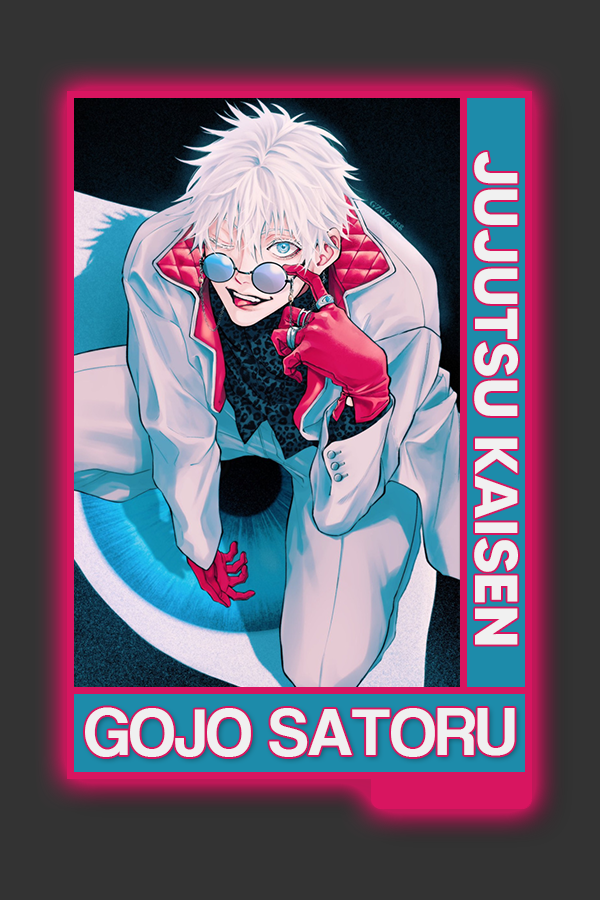
<style>
.page{position:relative;width:600px;height:900px;background:#333333}
.page>*{position:absolute;margin:0}
.t1{font:60.3px "MADETOMMY-Bold";color:#f1f1f1}
.t2{font:68.7px "CoolveticaRg-Regular";color:#f0f0f0}
</style>
<div class="page">
<p class="t1" style="left:474px;top:152px;width:44px;height:493px;rotate:90deg">JUJUTSU KAISEN</p>
<p class="t2" style="left:85px;top:707px;width:430px;height:50px">GOJO SATORU</p>
</div>
